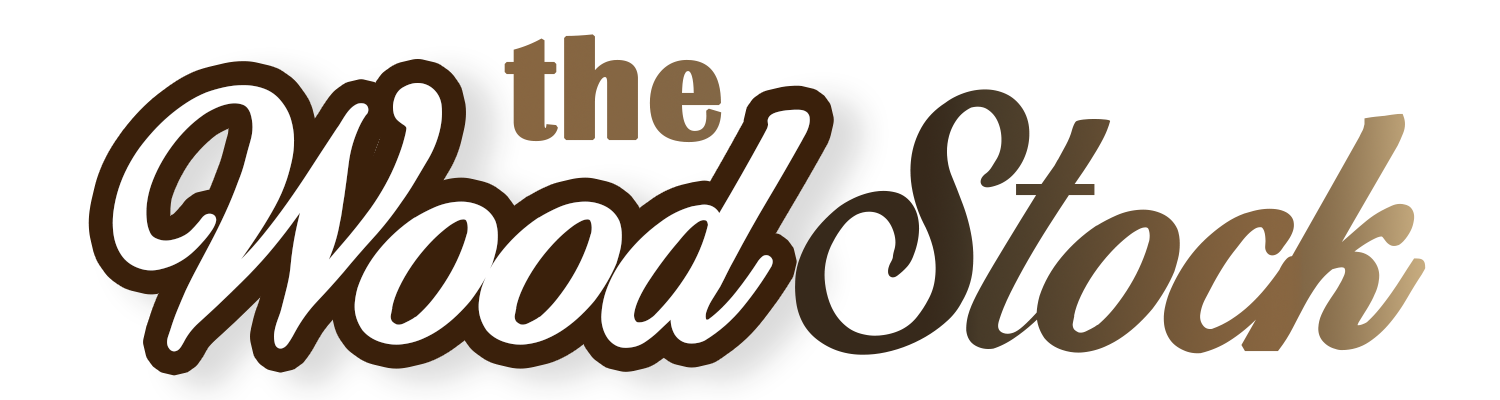
<style>
.page{position:relative;width:1500px;height:400px;background:#ffffff}
.page>*{position:absolute;margin:0}
.t1{font:150px "BritannicBold";color:#856642;font-weight:bold}
.t2{font:300px "BirdsofParadise-PersonaluseOnly";color:#ffffff;font-weight:bold}
.t3{font:300px "BirdsofParadise-PersonaluseOnly";font-weight:bold}
</style>
<div class="page">
<p class="t1" style="left:504px;top:34px;width:218px;height:109px">the</p>
<p class="t2" style="left:112px;top:83px;width:698px;height:269px">Wood</p>
<p class="t3" style="left:795px;top:89px;width:631px;height:266px">Stock</p>
</div>
